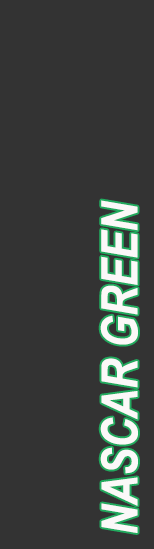
<style>
.page{position:relative;width:154px;height:549px;background:#333333}
.page>*{position:absolute;margin:0}
.t1{font:50px "ArialNarrow-BoldItalic";color:#fbf8f8}
</style>
<div class="page">
<p class="t1" style="left:100px;top:200px;width:38px;height:333px;rotate:-90deg">NASCAR GREEN</p>
</div>
